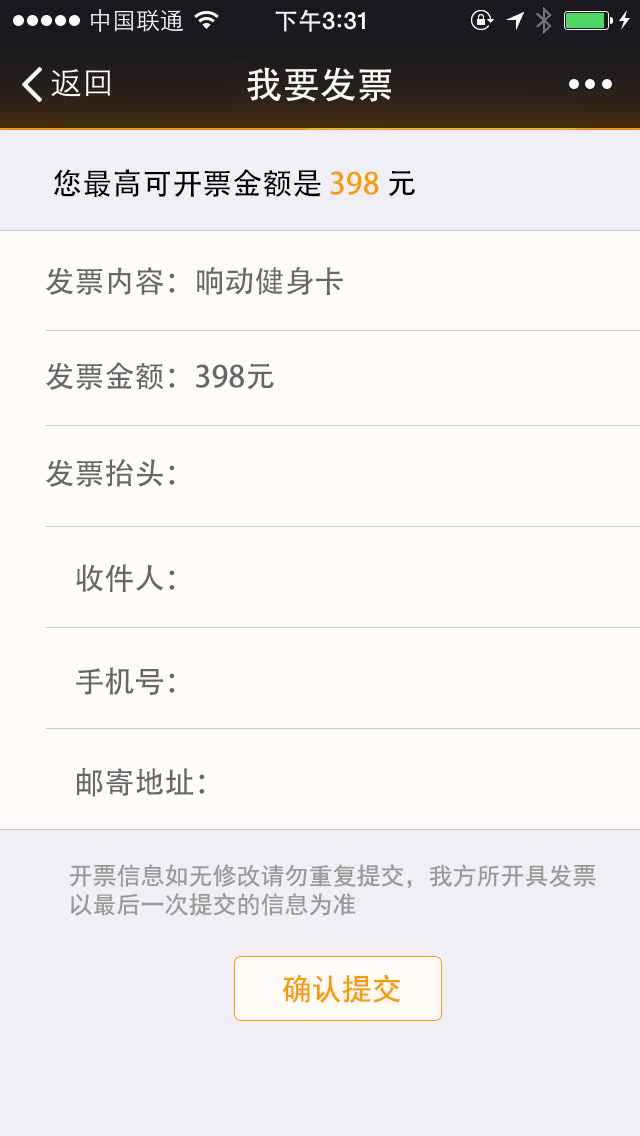
<style>
.page{position:relative;width:640px;height:1136px;background:#fffbf8}
.page>*{position:absolute;margin:0}
.t1{font:37.2px "AdobeHeitiStd-Regular";color:#fffbf8}
.t2{font:30px "AdobeHeitiStd-Regular";color:#000000}
.t3{font:30px "AdobeHeitiStd-Regular";color:#ff9900}
.t4{font:30px "AdobeHeitiStd-Regular";color:#666666}
.t5{font:24px "SimHei";color:#999999}
.t6{font:30px "SimHei";color:#ff9900}
</style>
<div class="page">
<p class="t1" style="left:247px;top:67px;width:144px;height:35px">我要发票</p>
<p class="t2" style="left:54px;top:169px;width:361px;height:28px">您最高可开票金额是 <span class="t3">398</span> 元</p>
<p class="t4" style="left:45px;top:267px;width:298px;height:28px">发票内容：响动健身卡</p>
<p class="t4" style="left:45px;top:362px;width:229px;height:28px">发票金额：398元</p>
<p class="t4" style="left:45px;top:459px;width:130px;height:28px">发票抬头：</p>
<p class="t4" style="left:76px;top:564px;width:99px;height:28px">收件人：</p>
<p class="t4" style="left:76px;top:667px;width:99px;height:29px">手机号：</p>
<p class="t4" style="left:76px;top:768px;width:129px;height:29px">邮寄地址：</p>
<p class="t5" style="left:69px;top:864px;width:527px;height:52px">开票信息如无修改请勿重复提交，我方所开具发票<br>以最后一次提交的信息为准</p>
<p class="t6" style="left:282px;top:974px;width:118px;height:29px">确认提交</p>
</div>
